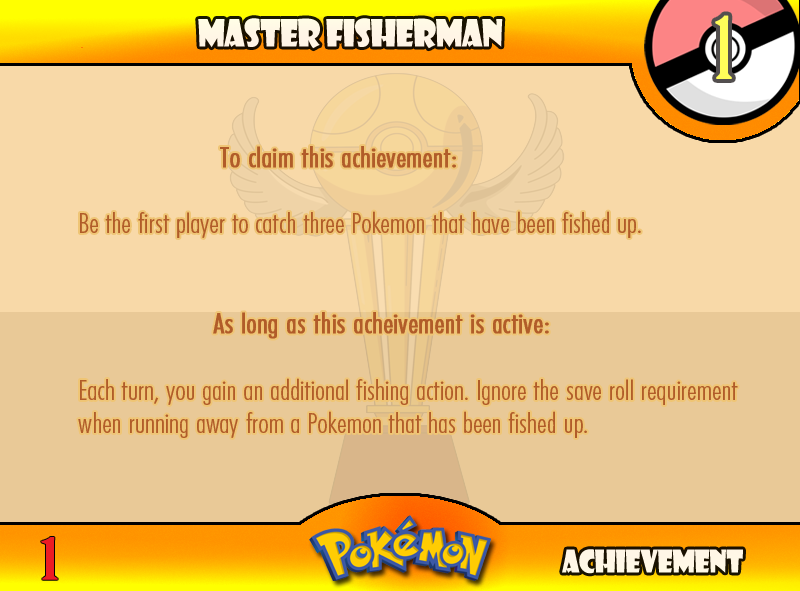
<style>
.page{position:relative;width:800px;height:591px;background:#f8d9a8}
.page>*{position:absolute;margin:0}
.t1{font:83.3px "BirchStd";letter-spacing:0.025em;color:#fffd59;font-weight:bold}
.t2{font:36.7px "ShowcardGothic-Reg";letter-spacing:-0.025em;color:#fff7e6;scale:0.91 1}
.t3{font:27.8px "FuturaCondensedBQ-Light";color:#b15c29;scale:1.08 1}
.t4{font:33.3px "FuturaCondensedBQ-Light";color:#b15c29;font-weight:bold;scale:1.08 1}
.t5{font:27.8px "FuturaCondensedBQ-Light";color:#b15c29;font-weight:bold;scale:1.08 1}
.t6{font:55.6px "BirchStd";color:#ed1c24;font-weight:bold;scale:1.5 1}
.t7{font:30.6px "ShowcardGothic-Reg";letter-spacing:-0.025em;color:#fff7e6;scale:0.91 1}
</style>
<div class="page">
<p class="t1" style="left:715px;top:15px;width:17px;height:64px">1</p>
<p class="t2" style="left:198px;top:18px;width:305px;height:31px">Master Fisherman</p>
<p class="t3" style="left:78px;top:146px;width:660px;height:292px"><span class="t4">          <br>      </span><span class="t5">To claim this achievement:<br><br> </span>Be the first player to catch three Pokemon that have been fished up.<br><br><br>      <span class="t5">As long as this acheivement is active:<br></span><br> Each turn, you gain an additional fishing action. Ignore the save roll requirement    when running away from a Pokemon that has been fished up.</p>
<p class="t6" style="left:41px;top:537px;width:17px;height:43px">1</p>
<p class="t7" style="left:562px;top:549px;width:181px;height:25px">Achievement</p>
</div>
